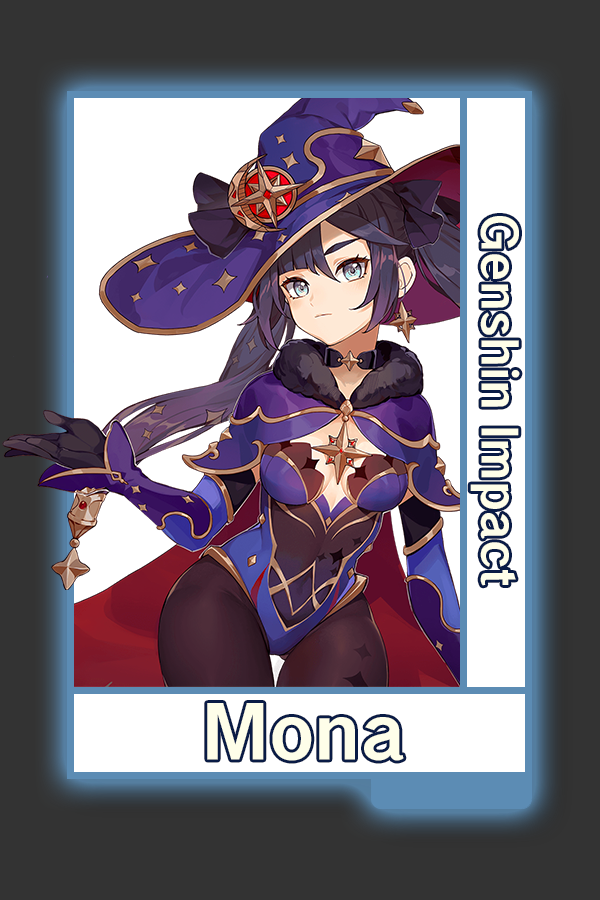
<style>
.page{position:relative;width:600px;height:900px;background:#333333}
.page>*{position:absolute;margin:0}
.t1{font:48.8px "HYWenHei-HEW";color:#fefef4}
.t2{font:75px "HYWenHei-HEW";color:#fefef4}
</style>
<div class="page">
<p class="t1" style="left:470px;top:216px;width:50px;height:370px;rotate:90deg">Genshin Impact</p>
<p class="t2" style="left:207px;top:703px;width:197px;height:58px">Mona</p>
</div>
